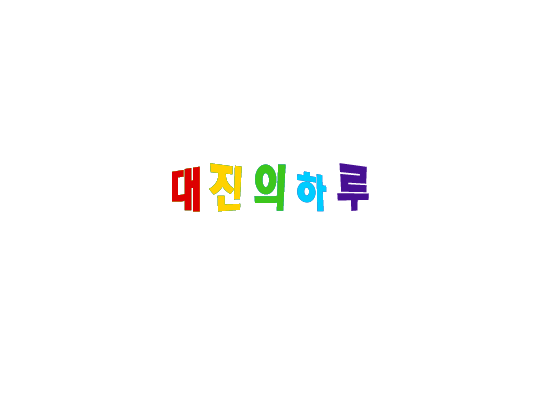
<style>
.page{position:relative;width:550px;height:400px;background:#ffffff}
.page>*{position:absolute;margin:0}
.t1{font:48px "RixComingsoonB";letter-spacing:0.2em;color:#dd0000;scale:0.8 1}
.t2{font:48px "RixComingsoonB";letter-spacing:0.2em;scale:0.8 1}
.t3{font:48px "RixComingsoonB";letter-spacing:0.2em;color:#ffd200;scale:0.8 1}
.t4{font:48px "RixComingsoonB";letter-spacing:0.2em;color:#3cc61c;scale:0.8 1}
.t5{font:48px "RixComingsoonB";letter-spacing:0.2em;color:#00ccff;scale:0.8 1}
.t6{font:48px "RixComingsoonB";letter-spacing:0.2em;color:#471093;scale:0.8 1}
</style>
<div class="page">
<p class="t1" style="left:172px;top:166px;width:28px;height:46px">대</p>
<p class="t2" style="left:172px;top:163px;width:70px;height:49px">대진</p>
<p class="t2" style="left:172px;top:163px;width:114px;height:49px">대진의</p>
<p class="t3" style="left:172px;top:163px;width:155px;height:49px">대<span class="t4">진</span><span class="t5">의</span><span class="t6">하</span></p>
<p class="t1" style="left:172px;top:163px;width:197px;height:49px">대<span class="t3">진</span><span class="t4">의</span><span class="t5">하</span><span class="t6">루</span></p>
</div>
